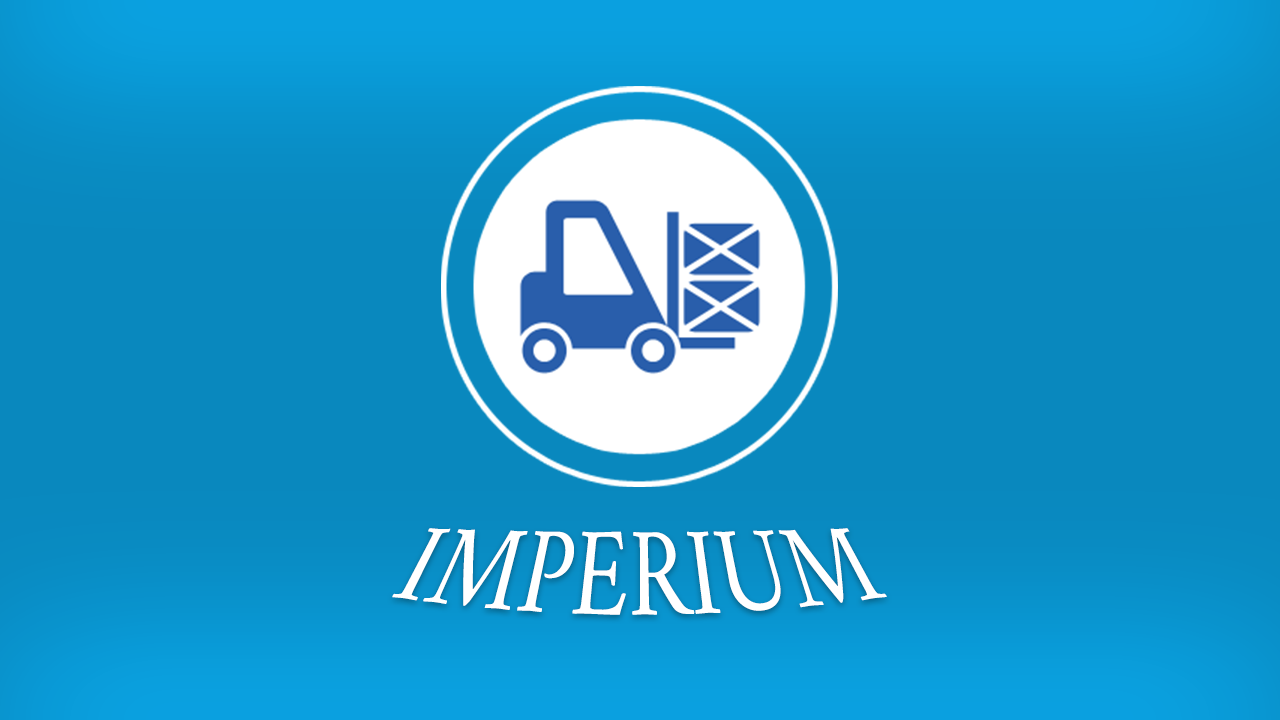
<style>
.page{position:relative;width:1280px;height:720px;background:#0988be}
.page>*{position:absolute;margin:0}
.t1{font:105px "Amiri-Regular";color:#f6faf9}
</style>
<div class="page">
<p class="t1" style="left:392px;top:528px;width:495px;height:87px">IMPERIUM</p>
</div>
